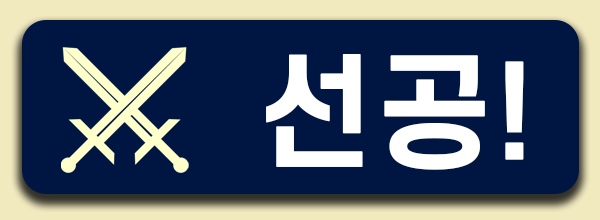
<style>
.page{position:relative;width:600px;height:220px;background:#001642}
.page>*{position:absolute;margin:0}
.t1{font:121.2px "S-CoreDream-6Bold";color:#ffffff;font-weight:bold}
</style>
<div class="page">
<p class="t1" style="left:266px;top:54px;width:258px;height:116px">선공!</p>
</div>
